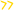
<style>
.page{position:relative;width:14px;height:10px;background:#ffffff}
.page>*{position:absolute;margin:0}
.t1{font:16px "ThrowMyHandsUpintheAir";color:#ffd600;text-transform:uppercase}
</style>
<div class="page">
<p class="t1" style="left:0px;top:0px;width:14px;height:10px">&gt;&gt;</p>
</div>
